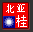
<style>
.page{position:relative;width:33px;height:32px;background:#f20000}
.page>*{position:absolute;margin:0}
.t1{font:10.4px "SimSun";color:#ffffff}
.t2{font:11.7px "SimSun";color:#ffffff}
</style>
<div class="page">
<p class="t1" style="left:6px;top:4px;width:19px;height:9px">北亚</p>
<p class="t2" style="left:16px;top:15px;width:11px;height:12px">桂</p>
</div>
